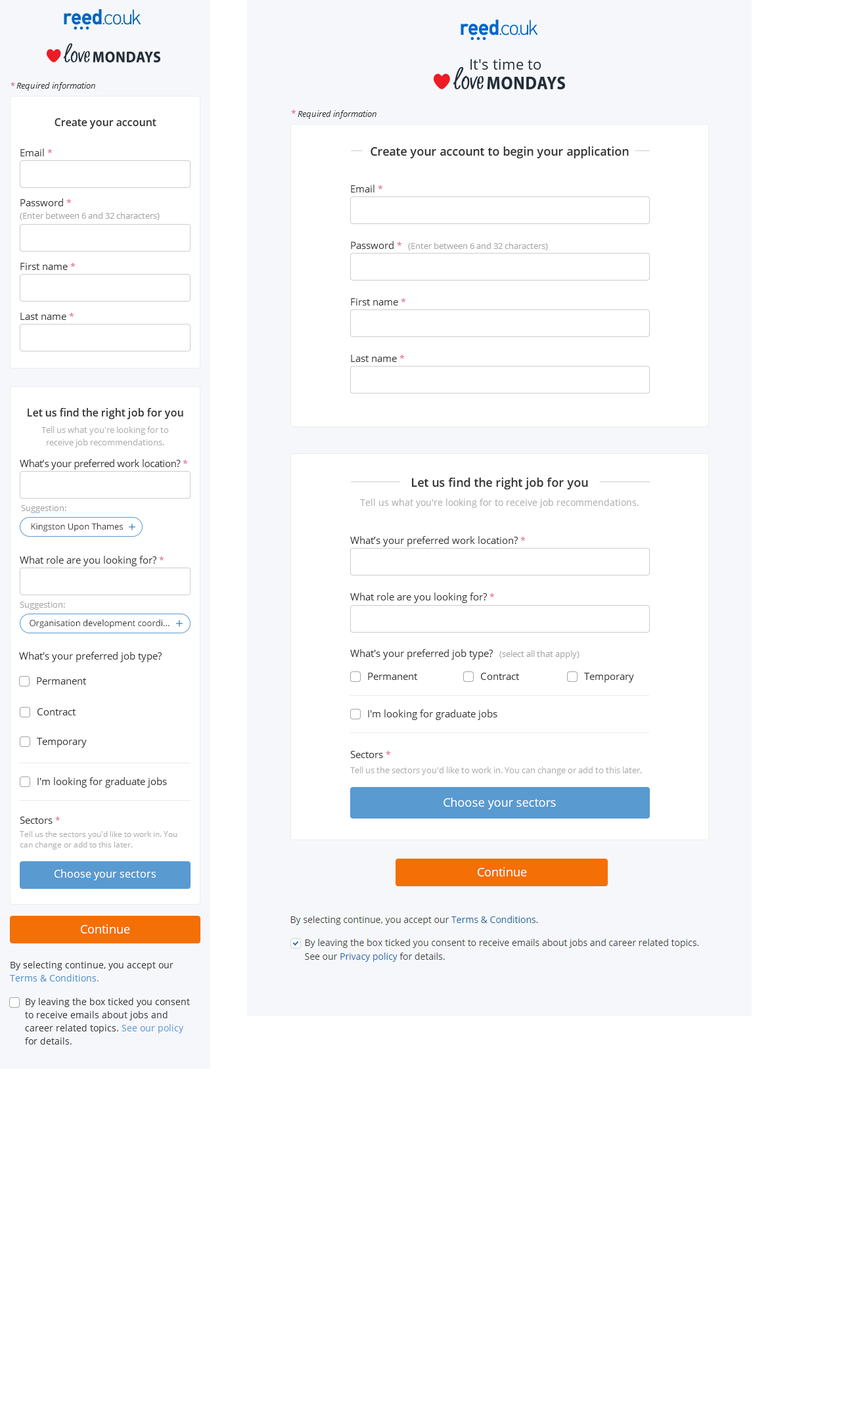
<style>
.page{position:relative;width:841px;height:1419px;background:#ffffff}
.page>*{position:absolute;margin:0}
.t1{font:14.4px "OpenSans";color:#222e39}
.t2{font:8.5px "OpenSans-Italic";color:#333333}
.t3{font:8.5px "OpenSans";color:#e25b89}
.t4{font:9.2px "OpenSans";color:#e25b89}
.t5{font:10.5px "OpenSans-Semibold";color:#333333}
.t6{font:9.9px "OpenSans";color:#333333}
.t7{font:11.8px "OpenSans-Semibold";color:#333333}
.t8{font:8.5px "OpenSans";color:#a4a4a4}
.t9{font:8.5px/12.5px "OpenSans";color:#adadad}
.t10{font:9.9px "OpenSans";letter-spacing:-0.02em;color:#333333}
.t11{font:9.2px "OpenSans";letter-spacing:-0.02em;color:#e25b89}
.t12{font:9.2px "OpenSans";color:#adadad}
.t13{font:8.5px "OpenSans";color:#333333}
.t14{font:8.5px "OpenSans";color:#adadad}
.t15{font:11.8px "OpenSans";color:#ffffff}
.t16{font:7.9px/10.5px "OpenSans";color:#adadad}
.t17{font:10.5px "OpenSans";color:#ffffff}
.t18{font:9.2px/13.1px "OpenSans";color:#333333}
.t19{font:9.2px/13.1px "OpenSans";color:#4990c7}
.t20{font:9.2px/13.1px "OpenSans";color:#599ad1}
</style>
<div class="page">
<p class="t1" style="left:470px;top:58px;width:70px;height:12px">It's time to</p>
<p class="t2" style="left:11px;top:82px;width:84px;height:9px"><span class="t3">* </span>Required information</p>
<p class="t2" style="left:291px;top:110px;width:85px;height:9px"><span class="t4">* </span>Required information</p>
<p class="t5" style="left:55px;top:118px;width:101px;height:11px">Create your account</p>
<p class="t6" style="left:20px;top:148px;width:32px;height:8px">Email <span class="t4">*</span></p>
<p class="t7" style="left:370px;top:146px;width:258px;height:12px">Create your account to begin your application</p>
<p class="t6" style="left:351px;top:185px;width:31px;height:7px">Email <span class="t4">*</span></p>
<p class="t6" style="left:20px;top:198px;width:51px;height:8px">Password <span class="t4">*</span></p>
<p class="t8" style="left:20px;top:212px;width:140px;height:8px">(Enter between 6 and 32 characters)</p>
<p class="t6" style="left:351px;top:241px;width:50px;height:8px">Password <span class="t4">*</span></p>
<p class="t8" style="left:408px;top:242px;width:140px;height:8px">(Enter between 6 and 32 characters)</p>
<p class="t6" style="left:20px;top:263px;width:55px;height:7px">First name <span class="t4">*</span></p>
<p class="t6" style="left:351px;top:298px;width:54px;height:7px">First name <span class="t4">*</span></p>
<p class="t6" style="left:20px;top:313px;width:54px;height:7px">Last name <span class="t4">*</span></p>
<p class="t6" style="left:351px;top:355px;width:53px;height:7px">Last name <span class="t4">*</span></p>
<p class="t5" style="left:28px;top:408px;width:155px;height:11px">Let us find the right job for you</p>
<p class="t9" style="left:41px;top:426px;width:128px;height:21px;text-align:center">Tell us what you're looking for to <br>receive job recommendations.</p>
<p class="t10" style="left:20px;top:459px;width:167px;height:11px">What’s your preferred work location? <span class="t11">*</span></p>
<p class="t7" style="left:412px;top:477px;width:176px;height:12px">Let us find the right job for you</p>
<p class="t8" style="left:21px;top:505px;width:45px;height:8px">Suggestion:</p>
<p class="t12" style="left:360px;top:498px;width:278px;height:10px">Tell us what you're looking for to receive job recommendations.</p>
<p class="t13" style="left:31px;top:523px;width:92px;height:8px">Kingston Upon Thames</p>
<p class="t6" style="left:350px;top:536px;width:175px;height:10px">What’s your preferred work location? <span class="t4">*</span></p>
<p class="t6" style="left:20px;top:556px;width:144px;height:10px">What role are you looking for? <span class="t4">*</span></p>
<p class="t6" style="left:350px;top:592px;width:144px;height:11px">What role are you looking for? <span class="t4">*</span></p>
<p class="t8" style="left:20px;top:602px;width:45px;height:7px">Suggestion:</p>
<p class="t13" style="left:30px;top:619px;width:139px;height:9px">Organisation development coordi...</p>
<p class="t6" style="left:19px;top:651px;width:143px;height:11px">What's your preferred job type?</p>
<p class="t6" style="left:350px;top:649px;width:143px;height:10px">What's your preferred job type?</p>
<p class="t8" style="left:499px;top:650px;width:80px;height:9px">(select all that apply)</p>
<p class="t6" style="left:37px;top:677px;width:49px;height:7px">Permanent</p>
<p class="t6" style="left:368px;top:672px;width:49px;height:8px">Permanent</p>
<p class="t6" style="left:481px;top:672px;width:38px;height:8px">Contract</p>
<p class="t6" style="left:584px;top:672px;width:50px;height:10px">Temporary</p>
<p class="t6" style="left:37px;top:708px;width:39px;height:7px">Contract</p>
<p class="t6" style="left:368px;top:709px;width:129px;height:11px">I'm looking for graduate jobs</p>
<p class="t6" style="left:37px;top:738px;width:50px;height:9px">Temporary</p>
<p class="t6" style="left:350px;top:751px;width:40px;height:7px">Sectors <span class="t4">*</span></p>
<p class="t14" style="left:350px;top:766px;width:292px;height:9px">Tell us the sectors you'd like to work in. You can change or add to this later.</p>
<p class="t6" style="left:37px;top:777px;width:130px;height:10px">I'm looking for graduate jobs</p>
<p class="t15" style="left:443px;top:797px;width:113px;height:12px">Choose your sectors</p>
<p class="t6" style="left:20px;top:816px;width:40px;height:8px">Sectors <span class="t4">*</span></p>
<p class="t16" style="left:20px;top:831px;width:157px;height:18px">Tell us the sectors you'd like to work in. You can change or add to this later.</p>
<p class="t17" style="left:55px;top:869px;width:101px;height:11px">Choose your sectors</p>
<p class="t15" style="left:477px;top:867px;width:50px;height:9px">Continue</p>
<p class="t15" style="left:81px;top:924px;width:49px;height:9px">Continue</p>
<p class="t18" style="left:10px;top:961px;width:163px;height:20px">By selecting continue, you accept our <span class="t19">Terms &amp; Conditions.</span></p>
<p class="t18" style="left:25px;top:998px;width:165px;height:46px">By leaving the box ticked you consent to receive emails about jobs and career related topics. <span class="t20">See our policy</span> for details.</p>
</div>
